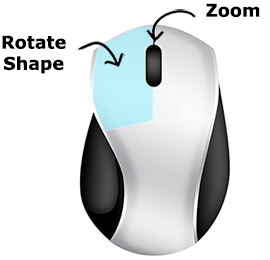
<style>
.page{position:relative;width:270px;height:260px;background:#ffffff}
.page>*{position:absolute;margin:0}
.t1{font:17.6px "Verdana-Bold";color:#000000}
</style>
<div class="page">
<p class="t1" style="left:206px;top:3px;width:54px;height:15px">Zoom</p>
<p class="t1" style="left:2px;top:35px;width:64px;height:39px;text-align:center">Rotate Shape</p>
</div>
